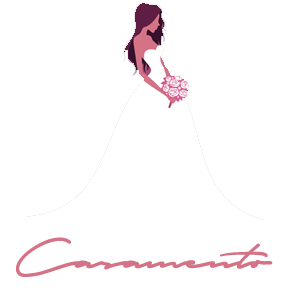
<style>
.page{position:relative;width:300px;height:300px;background:#ffffff}
.page>*{position:absolute;margin:0}
.t1{font:56px "AutografPERSONALUSEONLY";color:#d47386}
</style>
<div class="page">
<p class="t1" style="left:16px;top:237px;width:257px;height:40px">Casamento</p>
</div>
